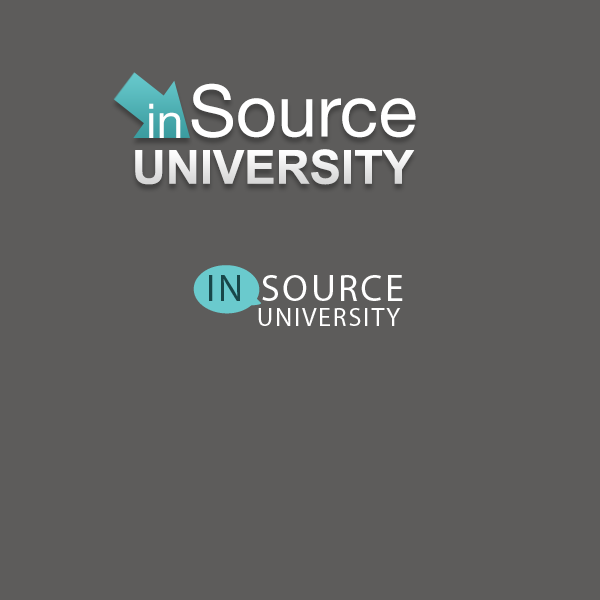
<style>
.page{position:relative;width:600px;height:600px;background:#5d5c5b}
.page>*{position:absolute;margin:0}
.t1{font:72px "HelveticaNeue";color:#ffffff}
.t2{font:48px "HelveticaNeue";color:#ffffff}
.t3{font:47px "Arial-BoldMT";color:#ffffff}
</style>
<div class="page">
<p class="t1" style="left:191px;top:83px;width:225px;height:55px">Source</p>
<p class="t2" style="left:149px;top:103px;width:32px;height:35px">in</p>
<p class="t3" style="left:135px;top:149px;width:280px;height:36px">UNIVERSITY</p>
</div>
